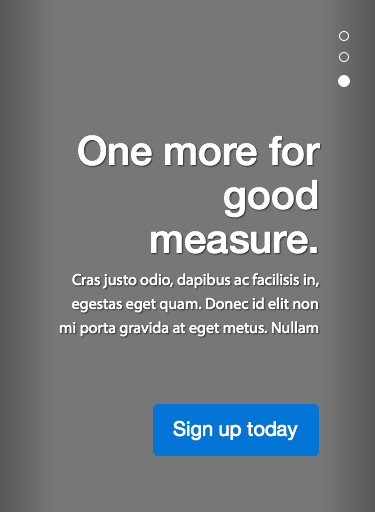
<style>
.page{position:relative;width:375px;height:512px;background:#777777}
.page>*{position:absolute;margin:0}
.t1{font:12px "MyriadPro-Regular";color:#ffffff}
</style>
<div class="page">
<p class="t1" style="left:59px;top:135px;width:261px;height:202px;text-align:right">One more for good measure.<br>Cras justo odio, dapibus ac facilisis in, egestas eget quam. Donec id elit non mi porta gravida at eget metus. Nullam id dolor id nibh ultricies vehicula ut id elit.</p>
<p class="t1" style="left:173px;top:420px;width:125px;height:21px">Sign up today</p>
</div>
